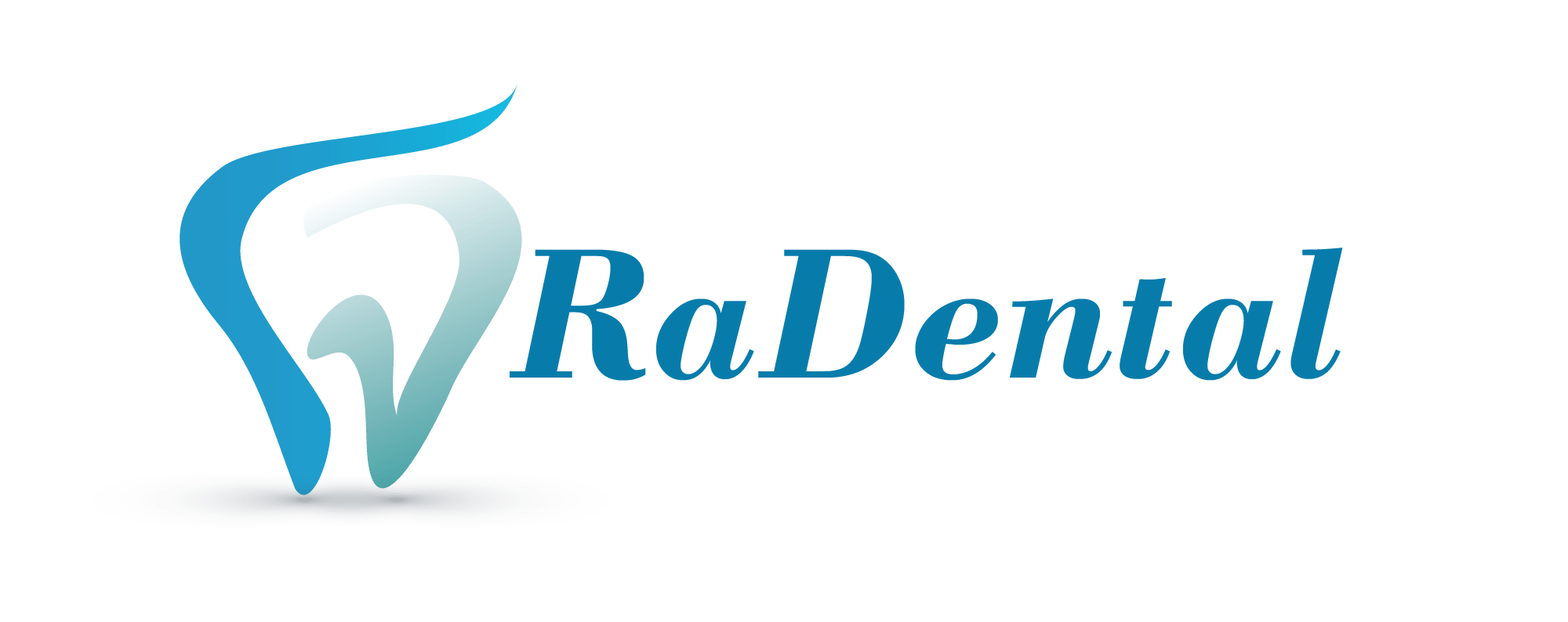
<style>
.page{position:relative;width:1568px;height:622px;background:#ffffff}
.page>*{position:absolute;margin:0}
.t1{font:196px "BodoniBT-BoldItalic";color:#077cab}
</style>
<div class="page">
<p class="t1" style="left:510px;top:248px;width:833px;height:133px">RaDental</p>
</div>
